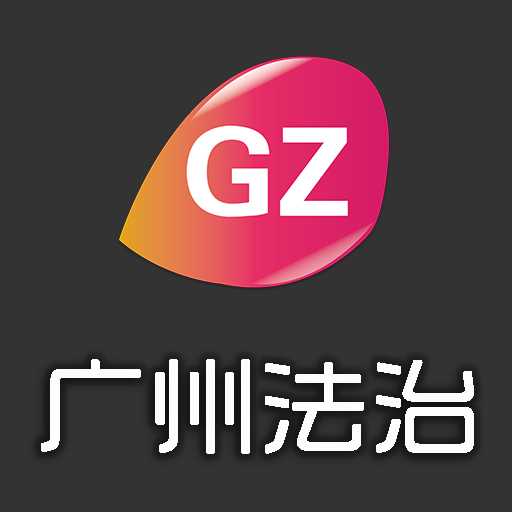
<style>
.page{position:relative;width:512px;height:512px;background:#333333}
.page>*{position:absolute;margin:0}
.t1{font:106.7px "SJshishang-Regular";letter-spacing:0.02em;color:#fcfdfd;font-weight:bold}
</style>
<div class="page">
<p class="t1" style="left:41px;top:359px;width:433px;height:95px">广州法治</p>
</div>
